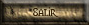
<style>
.page{position:relative;width:89px;height:25px}
.page>*{position:absolute;margin:0}
.t1{font:11px "Morpheus";color:#331e02}
</style>
<div class="page">
<p class="t1" style="left:33px;top:7px;width:26px;height:10px">Salir</p>
</div>
